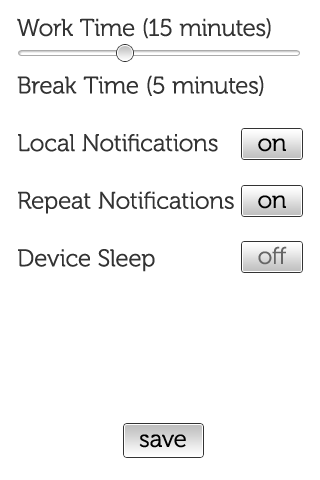
<style>
.page{position:relative;width:320px;height:480px;background:#ffffff}
.page>*{position:absolute;margin:0}
.t1{font:24px "Museo-300";color:#333333}
.t2{font:24px "Museo-300";color:#000000}
.t3{font:24px "Museo-300";color:#666666}
</style>
<div class="page">
<p class="t1" style="left:17px;top:18px;width:254px;height:254px">Work Time (15 minutes)<br><br>Break Time (5 minutes)<br><br>Local Notifications<br><br>Repeat Notifications<br><br>Device Sleep</p>
<p class="t2" style="left:258px;top:138px;width:28px;height:14px">on</p>
<p class="t2" style="left:258px;top:195px;width:28px;height:14px">on</p>
<p class="t3" style="left:258px;top:246px;width:29px;height:19px">off</p>
<p class="t2" style="left:139px;top:434px;width:47px;height:14px">save</p>
</div>
